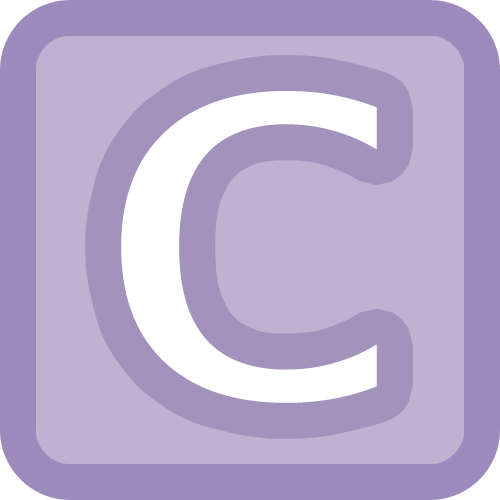
<style>
.page{position:relative;width:500px;height:500px;background:#beb1d2}
.page>*{position:absolute;margin:0}
.t1{font:412px "Menlo-Regular";color:#ffffff;scale:1.36 1}
</style>
<div class="page">
<p class="t1" style="left:121px;top:91px;width:256px;height:312px">C</p>
</div>
